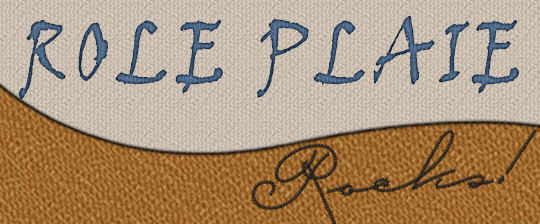
<style>
.page{position:relative;width:540px;height:224px}
.page>*{position:absolute;margin:0}
.t1{font:87px "VinerHandITC";letter-spacing:0.12em;text-transform:uppercase;scale:0.8 1}
</style>
<div class="page">
<p class="t1" style="left:18px;top:15px;width:501px;height:85px">Role Plaie</p>
</div>
